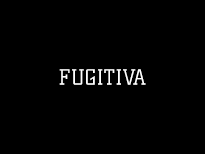
<style>
.page{position:relative;width:205px;height:154px;background:#000000}
.page>*{position:absolute;margin:0}
.t1{font:20.8px "KellySlab-Regular";color:#ffffff}
</style>
<div class="page">
<p class="t1" style="left:59px;top:69px;width:87px;height:16px">FUGITIVA</p>
</div>
